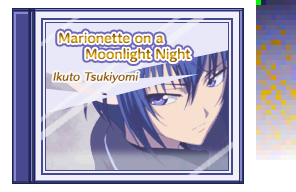
<style>
.page{position:relative;width:296px;height:192px}
.page>*{position:absolute;margin:0}
.t1{font:12px "HummingStd-B";letter-spacing:0.02em}
.t2{font:10px "HummingStd-D";letter-spacing:0.02em;color:#986000;font-style:italic}
</style>
<div class="page">
<p class="t1" style="left:59px;top:32px;width:148px;height:14px">Marionette on a        g</p>
<p class="t1" style="left:86px;top:48px;width:105px;height:14px">Moonlight Night</p>
<p class="t2" style="left:53px;top:71px;width:86px;height:13px">Ikuto Tsukiyomi</p>
</div>
